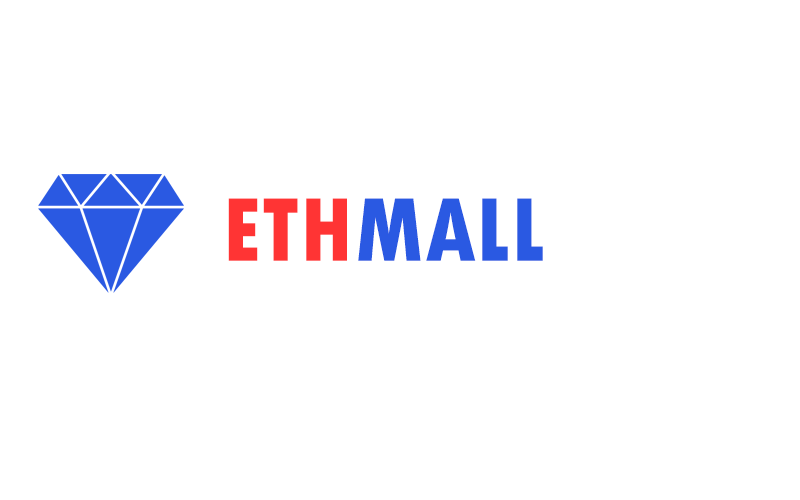
<style>
.page{position:relative;width:800px;height:500px;background:#ffffff}
.page>*{position:absolute;margin:0}
.t1{font:95.5px "TwCenMT-CondensedExtraBold";color:#2a59e2}
.t2{font:95.5px "TwCenMT-CondensedExtraBold";color:#ff3434}
</style>
<div class="page">
<p class="t1" style="left:228px;top:198px;width:315px;height:63px"><span class="t2">ETH</span>MALL</p>
</div>
